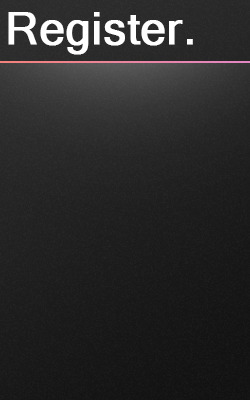
<style>
.page{position:relative;width:250px;height:400px}
.page>*{position:absolute;margin:0}
.t1{font:45px "MicrosoftSansSerif";color:#ffffff;font-weight:bold}
</style>
<div class="page">
<p class="t1" style="left:8px;top:12px;width:185px;height:43px">Register.</p>
</div>
